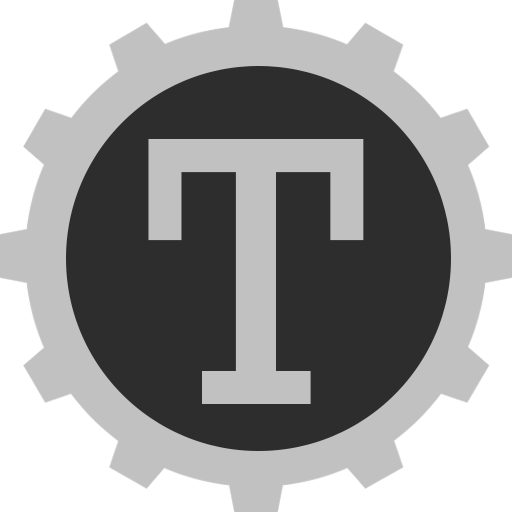
<style>
.page{position:relative;width:512px;height:512px;background:#2d2d2d}
.page>*{position:absolute;margin:0}
.t1{font:390px "Rockwell";color:#c1c1c1}
</style>
<div class="page">
<p class="t1" style="left:148px;top:139px;width:216px;height:265px">T</p>
</div>
